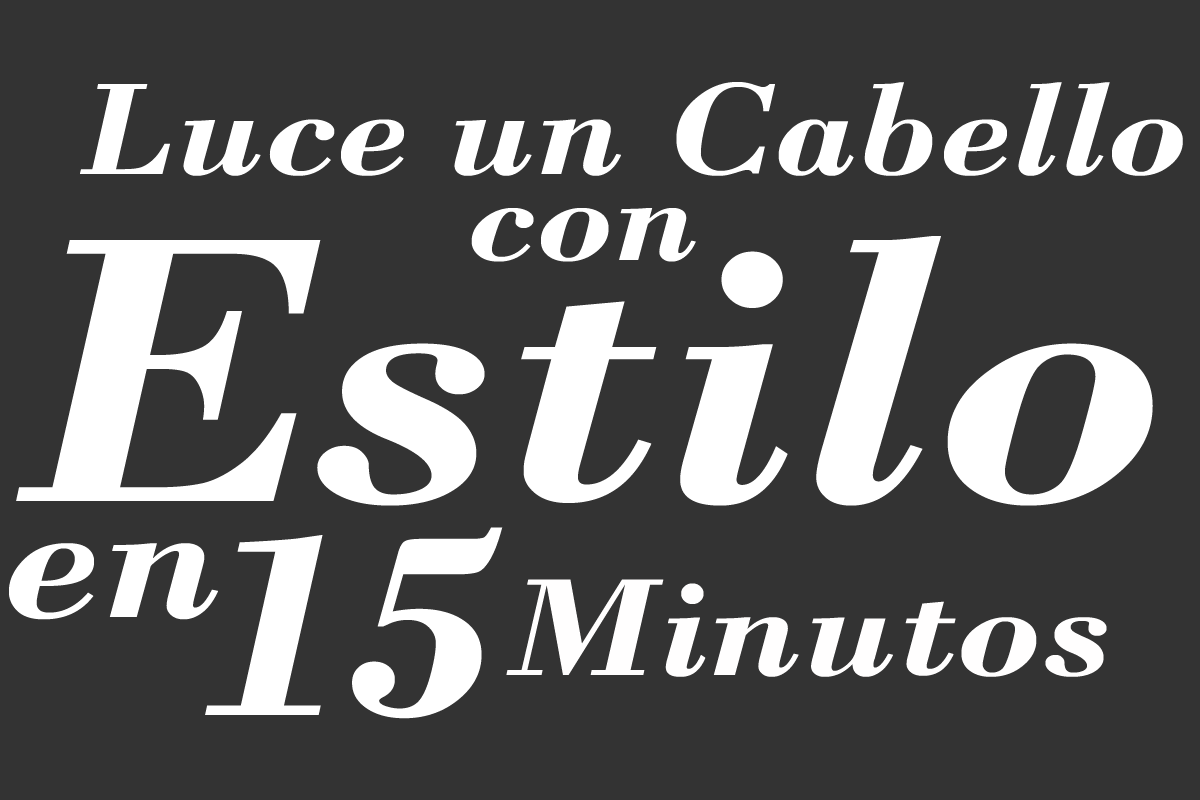
<style>
.page{position:relative;width:1200px;height:800px;background:#333333}
.page>*{position:absolute;margin:0}
.t1{font:137.4px "BodoniMT-BoldItalic";color:#ffffff;scale:1.09 1}
.t2{font:131.8px "BodoniMT-BoldItalic";color:#ffffff;scale:1.09 1}
.t3{font:398.3px "BodoniMT-BoldItalic";color:#ffffff;scale:1.09 1}
.t4{font:277.9px "BodoniMT-BoldItalic";color:#ffffff;scale:1.09 1}
.t5{font:186.1px "BodoniMT-BoldItalic";color:#ffffff;scale:1.09 1}
.t6{font:145.9px "BodoniMT-BoldItalic";color:#fffefe;scale:1.09 1}
</style>
<div class="page">
<p class="t1" style="left:80px;top:82px;width:1103px;height:94px">Luce un Cabello</p>
<p class="t2" style="left:471px;top:208px;width:225px;height:54px">con</p>
<p class="t3" style="left:16px;top:236px;width:1137px;height:270px">Estilo</p>
<p class="t4" style="left:205px;top:527px;width:298px;height:192px">15</p>
<p class="t5" style="left:9px;top:543px;width:209px;height:77px">en</p>
<p class="t6" style="left:506px;top:579px;width:601px;height:98px">Minutos</p>
</div>
